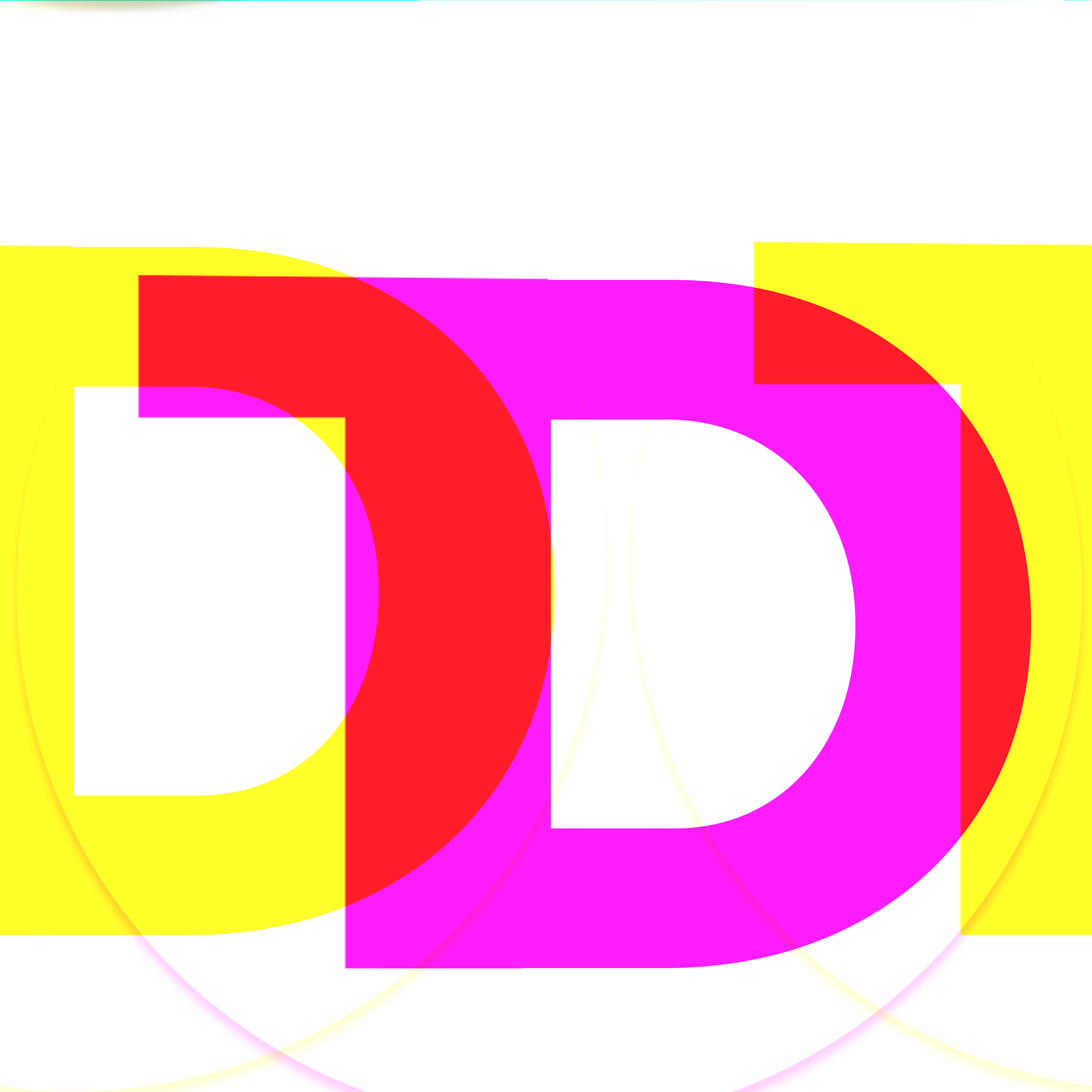
<style>
.page{position:relative;width:1092px;height:1092px;background:#ffffff}
.page>*{position:absolute;margin:0}
.t1{font:983px "Montserrat-Bold"}
</style>
<div class="page">
<p class="t1" style="left:375px;top:234px;width:653px;height:689px">D</p>
</div>
